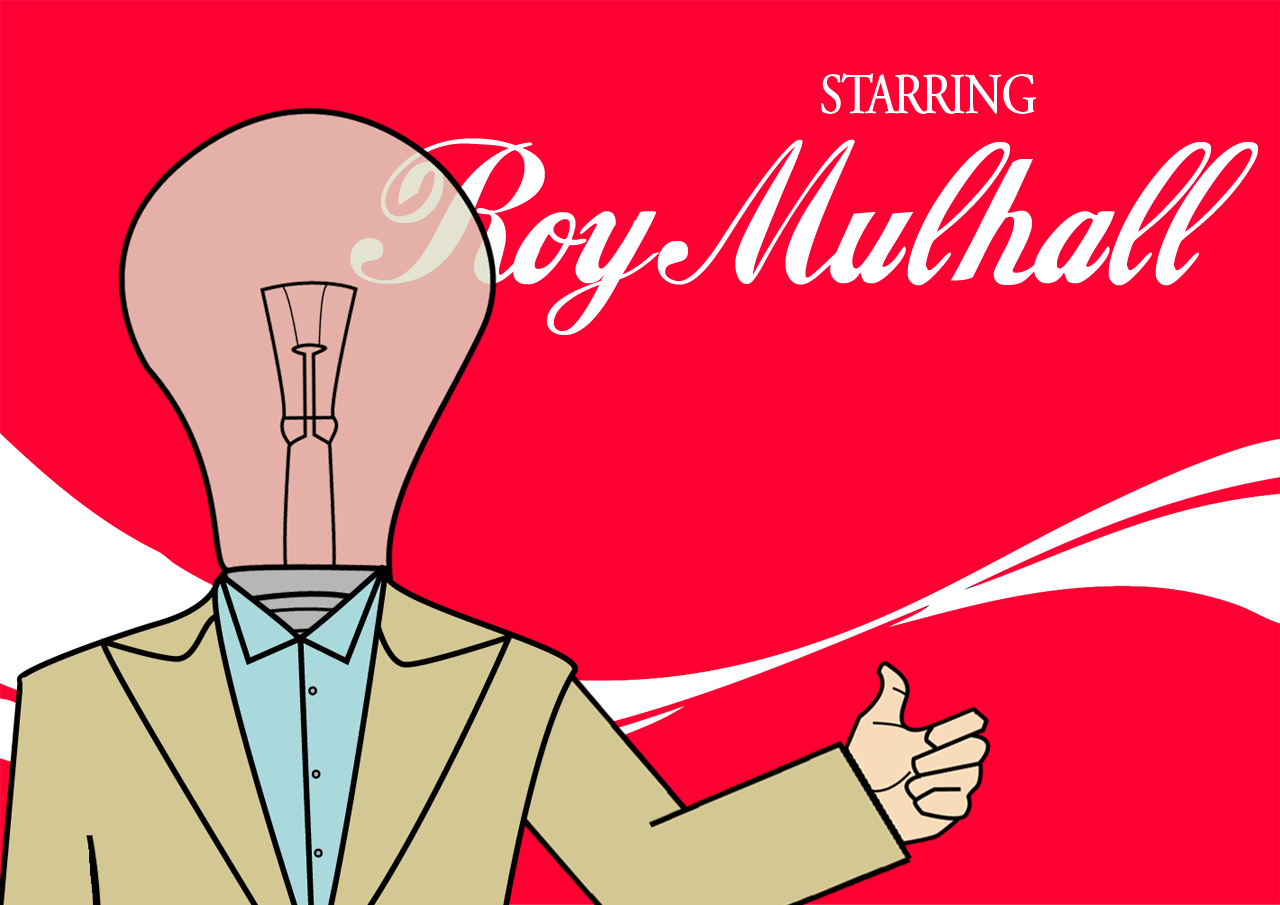
<style>
.page{position:relative;width:1280px;height:905px;background:#ff0033}
.page>*{position:absolute;margin:0}
.t1{font:57.8px "AGaramondPro-Regular";letter-spacing:-0.06em;color:#ffffff;scale:0.83 1}
.t2{font:57.8px "AGaramondPro-Regular";letter-spacing:-0.02em;color:#ffffff;scale:0.83 1}
.t3{font:57.8px "AGaramondPro-Regular";letter-spacing:-0.14em;color:#ffffff;scale:0.83 1}
.t4{font:221.6px "CocaColaii";color:#ffffff}
.t5{font:221.6px "CocaColaii";letter-spacing:0.08em;color:#ffffff}
.t6{font:221.6px "CocaColaii";letter-spacing:0.02em;color:#ffffff}
</style>
<div class="page">
<p class="t1" style="left:821px;top:73px;width:214px;height:41px"><span class="t2">S</span><span class="t3">T</span>ARR<span class="t2">ING</span></p>
<p class="t1" style="left:822px;top:73px;width:214px;height:41px"><span class="t2">S</span><span class="t3">T</span>ARR<span class="t2">ING</span></p>
<p class="t4" style="left:350px;top:138px;width:908px;height:197px">Roy Mu<span class="t5">l</span>ha<span class="t6">l</span>l</p>
</div>
